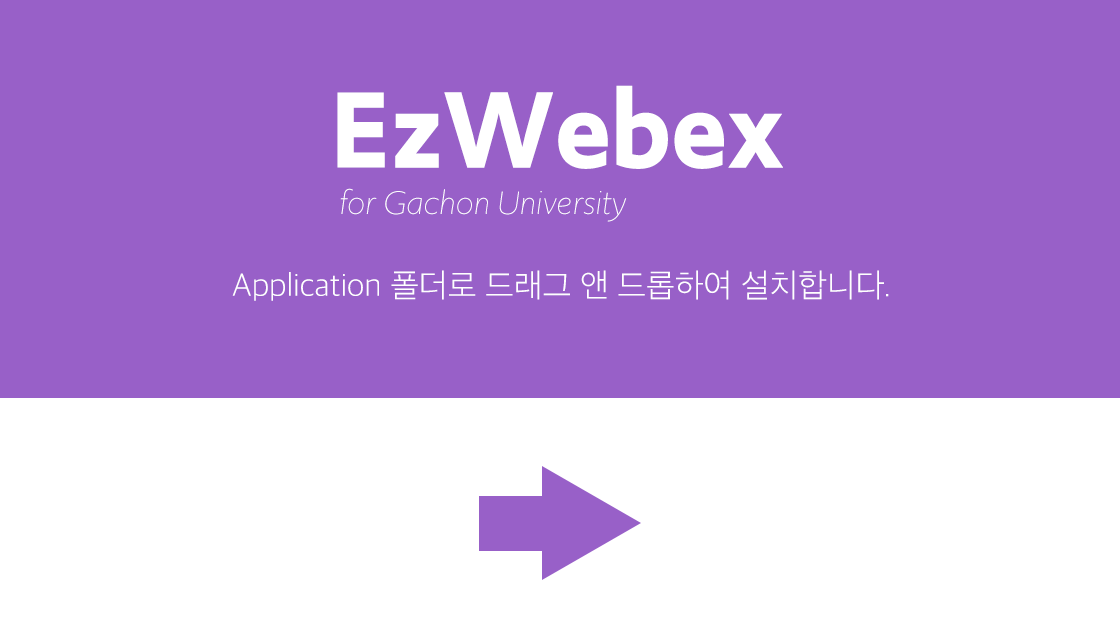
<style>
.page{position:relative;width:1120px;height:640px;background:#9860c8}
.page>*{position:absolute;margin:0}
.t1{font:114.1px "Upgrade-Semibold";color:#ffffff}
.t2{font:34.2px "Upgrade-LightItalic";color:#ffffff}
.t3{font:33.2px "AppleSDGothicNeo-UltraLight";color:#ffffff}
</style>
<div class="page">
<p class="t1" style="left:337px;top:85px;width:446px;height:84px">EzWebex</p>
<p class="t2" style="left:340px;top:188px;width:287px;height:34px">for Gachon University</p>
<p class="t3" style="left:232px;top:270px;width:657px;height:31px">Application 폴더로 드래그 앤 드롭하여 설치합니다.</p>
</div>
